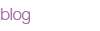
<style>
.page{position:relative;width:100px;height:31px;background:#ffffff}
.page>*{position:absolute;margin:0}
.t1{font:17px "HelveticaNeue-Light";letter-spacing:-0.02em;color:#a56fa7}
</style>
<div class="page">
<p class="t1" style="left:1px;top:8px;width:29px;height:16px">blog</p>
</div>
